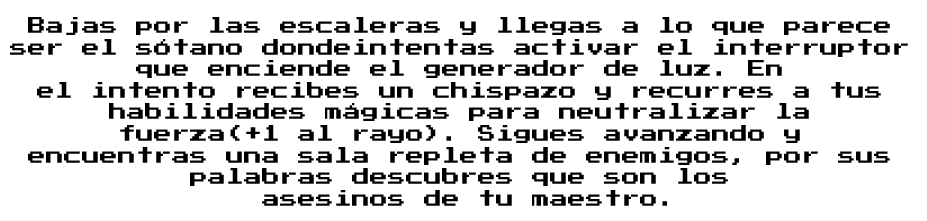
<style>
.page{position:relative;width:927px;height:221px;background:#ffffff}
.page>*{position:absolute;margin:0}
.t1{font:18px "PressStart2P";color:#000000}
</style>
<div class="page">
<p class="t1" style="left:10px;top:17px;width:898px;height:189px;text-align:center">Bajas por las escaleras y llegas a lo que parece <br>ser el sótano dondeintentas activar el interruptor <br>que enciende el generador de luz. En <br>el intento recibes un chispazo y recurres a tus <br>habilidades mágicas para neutralizar la <br>fuerza(+1 al rayo). Sigues avanzando y <br>encuentras una sala repleta de enemigos, por sus <br>palabras descubres que son los <br>asesinos de tu maestro.</p>
</div>
